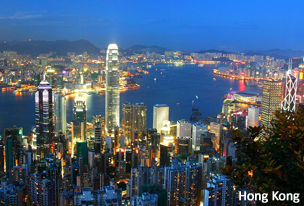
<style>
.page{position:relative;width:304px;height:206px}
.page>*{position:absolute;margin:0}
.t1{font:14px "Calibri";letter-spacing:-0.025em;color:#ffffff;font-weight:bold}
</style>
<div class="page">
<p class="t1" style="left:239px;top:191px;width:61px;height:12px">Hong Kong</p>
</div>
